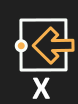
<style>
.page{position:relative;width:78px;height:104px;background:#202020}
.page>*{position:absolute;margin:0}
.t1{font:33.3px "Calibri-Bold";color:#ffffff}
</style>
<div class="page">
<p class="t1" style="left:32px;top:77px;width:18px;height:22px">X</p>
</div>
